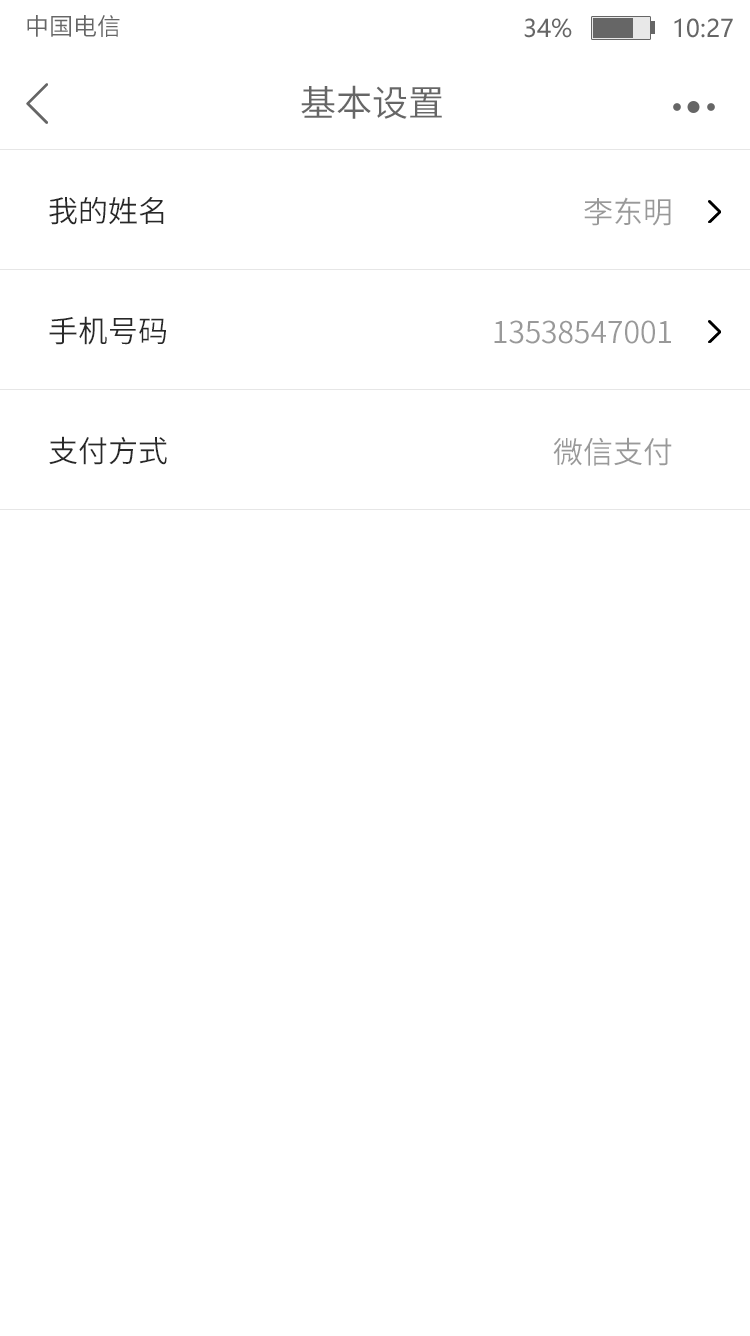
<style>
.page{position:relative;width:750px;height:1336px;background:#ffffff}
.page>*{position:absolute;margin:0}
.t1{font:24px "SourceHanSansCN-Normal";color:#666666}
.t2{font:24px "MicrosoftYaHei";color:#666666}
.t3{font:36px "SourceHanSansCN-Normal";color:#666666}
.t4{font:30px/30px "SourceHanSansCN-Normal";color:#282828}
.t5{font:30px/30px "SourceHanSansCN-Normal";color:#999999}
</style>
<div class="page">
<p class="t1" style="left:27px;top:15px;width:93px;height:22px">中国电信</p>
<p class="t2" style="left:524px;top:18px;width:209px;height:20px">34%              10:27</p>
<p class="t3" style="left:301px;top:85px;width:141px;height:34px">基本设置</p>
<p class="t4" style="left:49px;top:197px;width:118px;height:268px">我的姓名<br><br><br><br>手机号码<br><br><br><br>支付方式</p>
<p class="t5" style="left:494px;top:197px;width:178px;height:269px;text-align:right">李东明<br><br><br><br>13538547001<br><br><br><br>微信支付</p>
</div>
